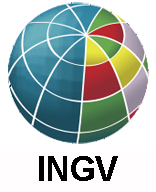
<style>
.page{position:relative;width:156px;height:192px;background:#ffffff}
.page>*{position:absolute;margin:0}
.t1{font:34px "Arial-BoldMT";letter-spacing:-0.015em;color:#010000}
</style>
<div class="page">
<p class="t1" style="left:39px;top:156px;width:79px;height:25px">INGV</p>
</div>
